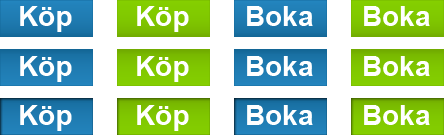
<style>
.page{position:relative;width:444px;height:135px;background:#ffffff}
.page>*{position:absolute;margin:0}
.t1{font:28px "Arial-BoldMT";color:#ffffff}
</style>
<div class="page">
<p class="t1" style="left:20px;top:6px;width:52px;height:26px">Köp</p>
<p class="t1" style="left:137px;top:6px;width:52px;height:26px">Köp</p>
<p class="t1" style="left:247px;top:6px;width:66px;height:20px">Boka</p>
<p class="t1" style="left:364px;top:6px;width:66px;height:20px">Boka</p>
<p class="t1" style="left:20px;top:56px;width:52px;height:26px">Köp</p>
<p class="t1" style="left:137px;top:56px;width:52px;height:26px">Köp</p>
<p class="t1" style="left:247px;top:56px;width:66px;height:20px">Boka</p>
<p class="t1" style="left:364px;top:56px;width:66px;height:20px">Boka</p>
<p class="t1" style="left:20px;top:105px;width:52px;height:26px">Köp</p>
<p class="t1" style="left:137px;top:105px;width:52px;height:26px">Köp</p>
<p class="t1" style="left:247px;top:105px;width:66px;height:20px">Boka</p>
<p class="t1" style="left:364px;top:105px;width:66px;height:20px">Boka</p>
</div>
